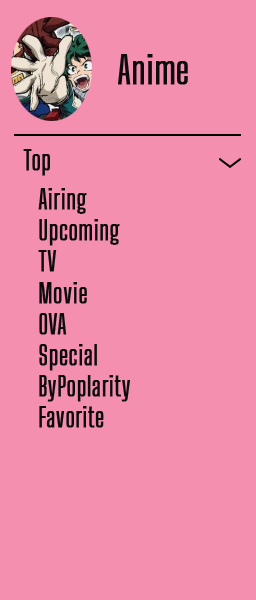
<style>
.page{position:relative;width:256px;height:600px;background:#f48fb0}
.page>*{position:absolute;margin:0}
.t1{font:37.5px "BigShouldersDisplay-Regular";color:#0c0c0c;font-weight:bold}
.t2{font:26px "BigShouldersDisplay-Regular";color:#0c0c0c;font-weight:bold}
</style>
<div class="page">
<p class="t1" style="left:118px;top:54px;width:70px;height:31px">Anime</p>
<p class="t2" style="left:23px;top:149px;width:27px;height:27px">Top</p>
<p class="t2" style="left:38px;top:188px;width:92px;height:240px">Airing<br>Upcoming<br>TV<br>Movie<br>OVA<br>Special<br>ByPoplarity<br>Favorite</p>
</div>
